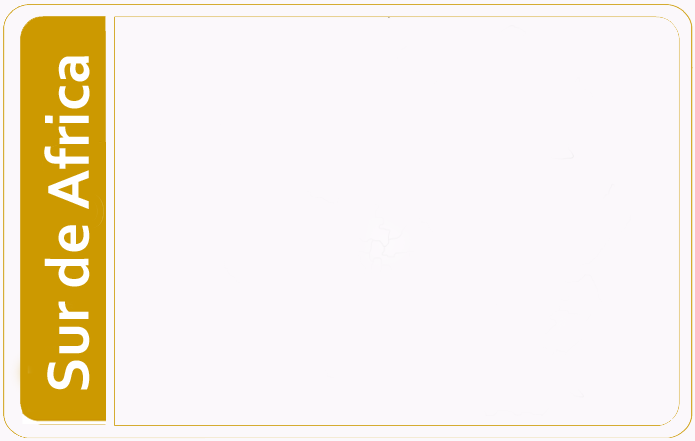
<style>
.page{position:relative;width:695px;height:441px;background:#fbf8fb}
.page>*{position:absolute;margin:0}
.t1{font:62px "Corbel-Bold";color:#ffffff}
.t2{font:72px "Corbel-Bold";color:#ffffff}
</style>
<div class="page">
<p class="t1" style="left:44px;top:56px;width:46px;height:334px;rotate:-90deg"><span class="t2"> </span>Sur de Africa</p>
</div>
